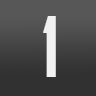
<style>
.page{position:relative;width:96px;height:96px;background:#313131}
.page>*{position:absolute;margin:0}
.t1{font:80px "AgencyFB-Bold";color:#f1f1f1}
</style>
<div class="page">
<p class="t1" style="left:43px;top:16px;width:13px;height:61px">1</p>
</div>
